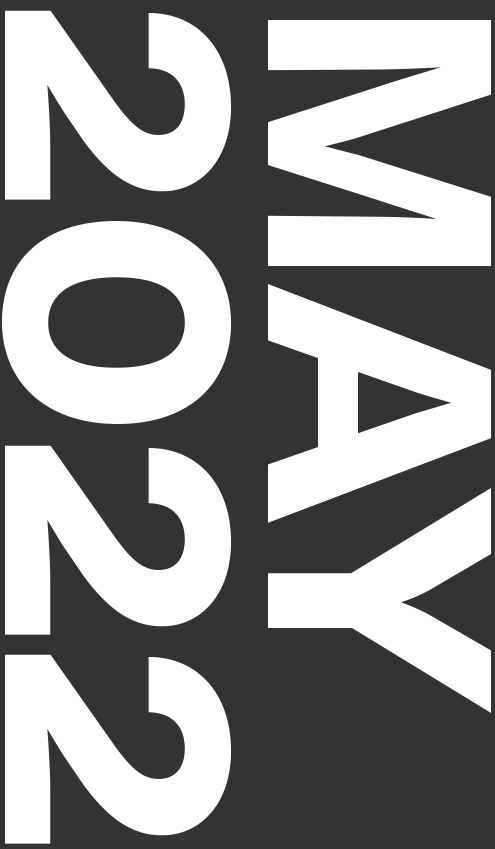
<style>
.page{position:relative;width:495px;height:849px;background:#333333}
.page>*{position:absolute;margin:0}
.t1{font:193.7px/263.3px "NeogroteskEss-Black";color:#ffffff}
</style>
<div class="page">
<p class="t1" style="left:1px;top:10px;width:490px;height:834px;text-align:right;rotate:90deg">MAY<br>2022</p>
</div>
